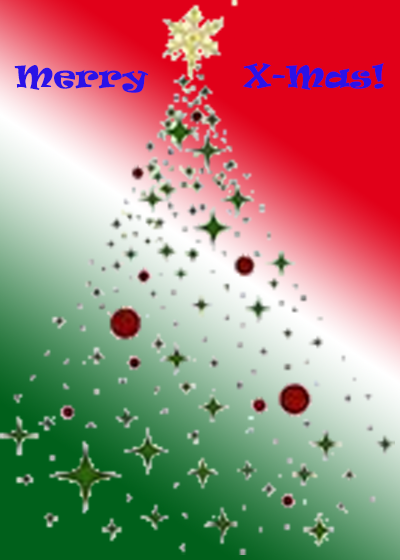
<style>
.page{position:relative;width:400px;height:560px}
.page>*{position:absolute;margin:0}
.t1{font:30px "Ravie";color:#2b12e7}
</style>
<div class="page">
<p class="t1" style="left:14px;top:63px;width:370px;height:30px">Merry        X-Mas!</p>
</div>
